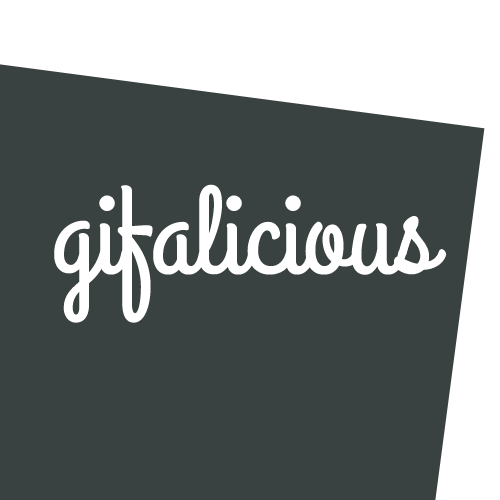
<style>
.page{position:relative;width:500px;height:500px;background:#394240}
.page>*{position:absolute;margin:0}
.t1{font:125px "GrandHotel-Regular";color:#ffffff}
</style>
<div class="page">
<p class="t1" style="left:54px;top:184px;width:393px;height:139px">gifalicious</p>
</div>
